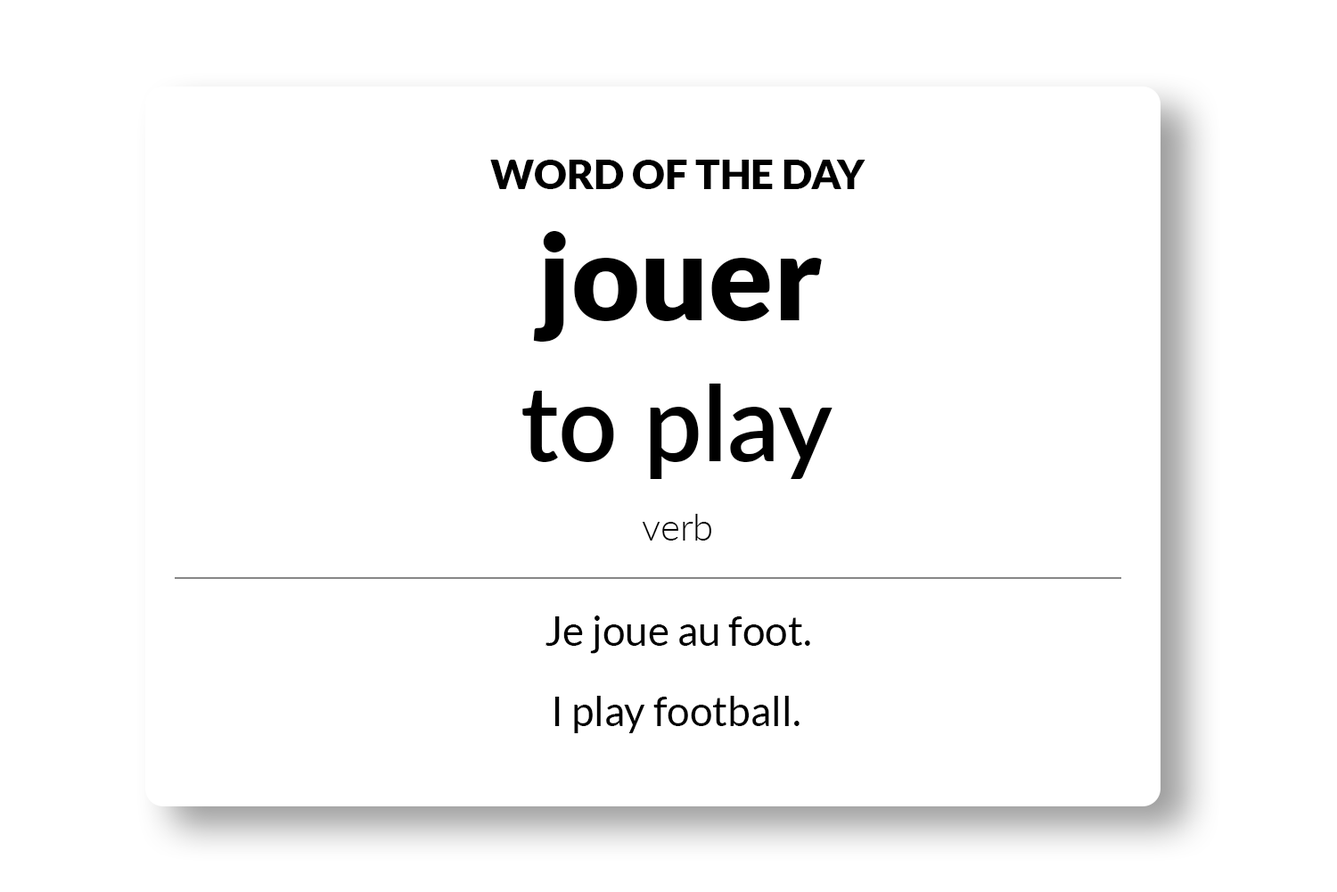
<style>
.page{position:relative;width:1337px;height:892px;background:#ffffff}
.page>*{position:absolute;margin:0}
.t1{font:40.9px "Lato-Black";color:#000000}
.t2{font:118.9px "Lato-Black";color:#000000}
.t3{font:104px "Lato-Semibold";color:#000000}
.t4{font:37.2px "Lato-Light";color:#000000}
.t5{font:40.9px "Lato-Regular";color:#000000}
</style>
<div class="page">
<p class="t1" style="left:490px;top:160px;width:376px;height:29px">WORD OF THE DAY</p>
<p class="t2" style="left:533px;top:231px;width:289px;height:110px">jouer</p>
<p class="t3" style="left:522px;top:383px;width:311px;height:96px">to play</p>
<p class="t4" style="left:642px;top:514px;width:69px;height:26px">verb</p>
<p class="t5" style="left:546px;top:615px;width:264px;height:39px">Je joue au foot.</p>
<p class="t5" style="left:555px;top:695px;width:245px;height:38px">I play football.</p>
</div>
